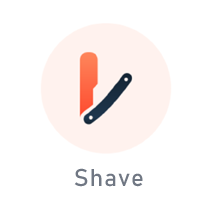
<style>
.page{position:relative;width:216px;height:216px;background:#ffffff}
.page>*{position:absolute;margin:0}
.t1{font:24px "Bahnschrift";letter-spacing:0.05em;color:#707783}
</style>
<div class="page">
<p class="t1" style="left:74px;top:168px;width:69px;height:19px">Shave</p>
</div>
